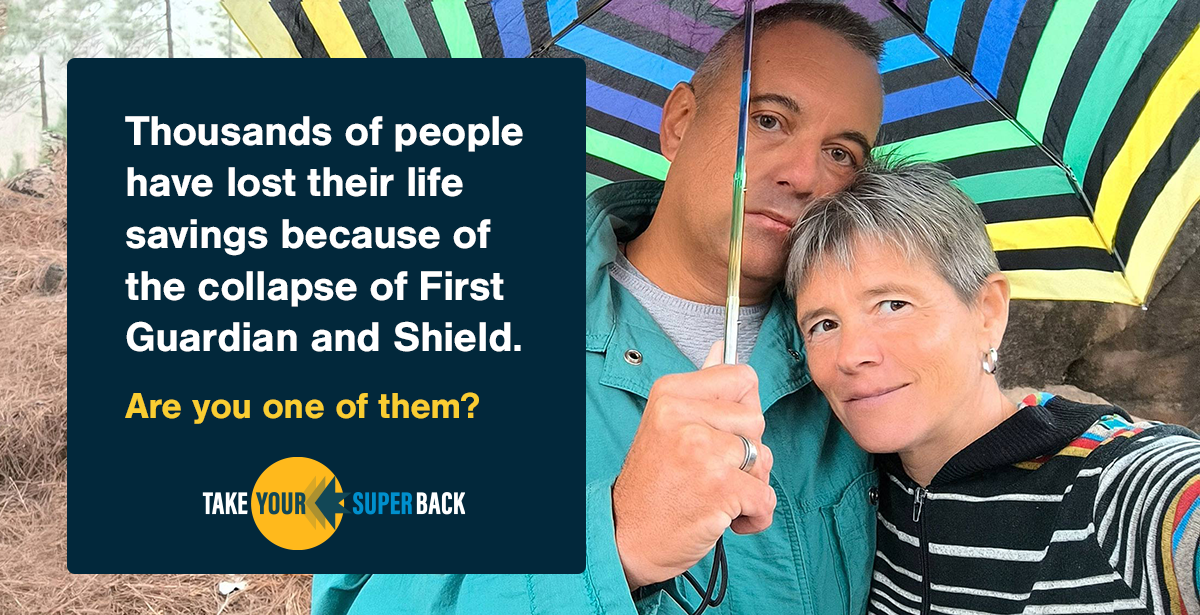
<style>
.page{position:relative;width:1200px;height:615px;background:#02283b}
.page>*{position:absolute;margin:0}
.t1{font:43px "NimbusSan-Bol";letter-spacing:-0.02em;color:#ffffff}
.t2{font:37.5px "NimbusSan-Bol";letter-spacing:-0.02em;color:#f9cd32}
</style>
<div class="page">
<p class="t1" style="left:125px;top:116px;width:398px;height:236px">Thousands of people have lost their life savings because of the collapse of First Guardian and Shield.<br><br>Are you one of them?</p>
<p class="t2" style="left:125px;top:392px;width:354px;height:32px">Are you one of them?</p>
</div>
